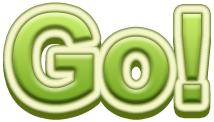
<style>
.page{position:relative;width:214px;height:122px;background:#ffffff}
.page>*{position:absolute;margin:0}
.t1{font:122.6px "Arial-BoldMT";scale:0.97 1}
</style>
<div class="page">
<p class="t1" style="left:13px;top:12px;width:188px;height:92px">Go!</p>
<p class="t1" style="left:13px;top:18px;width:188px;height:92px">Go!</p>
</div>
